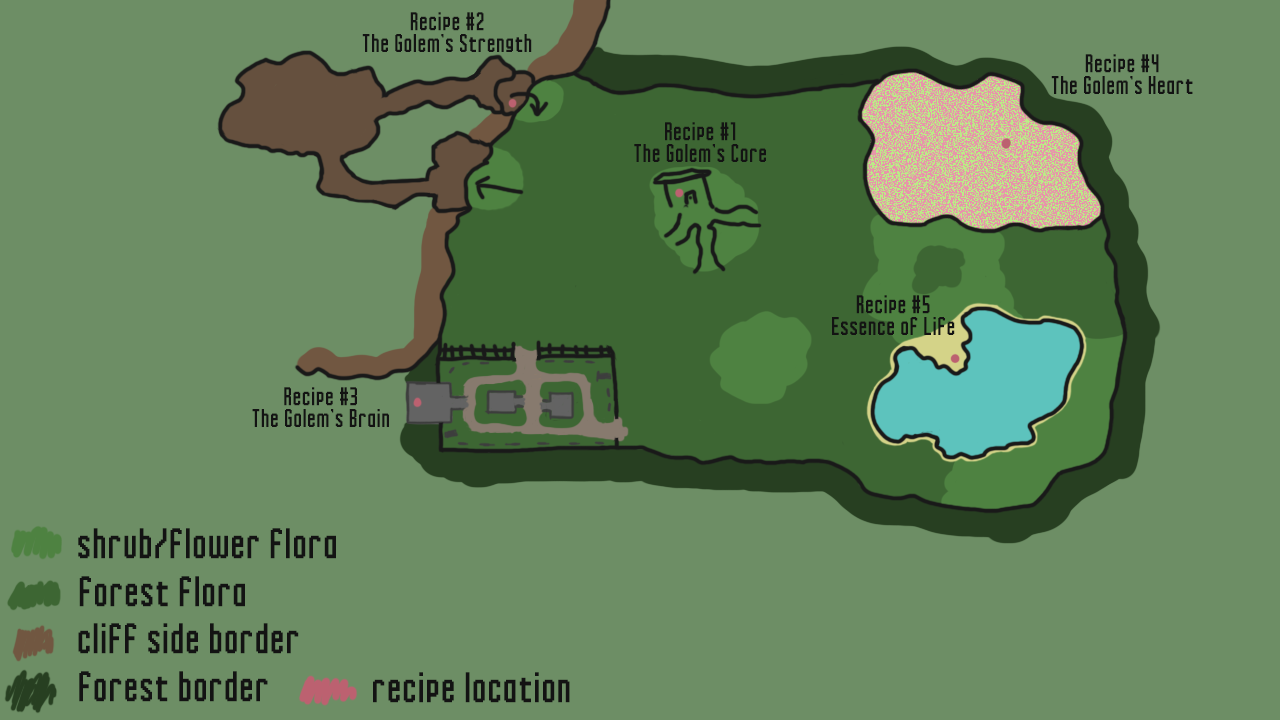
<style>
.page{position:relative;width:1280px;height:720px;background:#6d8e65}
.page>*{position:absolute;margin:0}
.t1{font:18px "Inky-Thin-Pixels";letter-spacing:0.075em;color:#131313}
.t2{font:30px "Inky-Thin-Pixels";letter-spacing:0.075em;color:#131313}
</style>
<div class="page">
<p class="t1" style="left:362px;top:12px;width:170px;height:40px;text-align:center">Recipe #2<br>The Golem’s Strength</p>
<p class="t1" style="left:1051px;top:54px;width:142px;height:40px;text-align:center">Recipe #4<br>The Golem’s Heart</p>
<p class="t1" style="left:634px;top:122px;width:132px;height:40px;text-align:center">Recipe #1<br>The Golem’s Core</p>
<p class="t1" style="left:832px;top:295px;width:123px;height:40px;text-align:center">Recipe #5<br>Essence of Life</p>
<p class="t1" style="left:252px;top:387px;width:137px;height:40px;text-align:center">Recipe #3<br>The Golem’s Brain</p>
<p class="t2" style="left:78px;top:528px;width:258px;height:31px">shrub/flower flora</p>
<p class="t2" style="left:79px;top:576px;width:166px;height:31px">forest flora</p>
<p class="t2" style="left:78px;top:623px;width:221px;height:31px">cliff side border</p>
<p class="t2" style="left:79px;top:671px;width:189px;height:31px">forest border</p>
<p class="t2" style="left:373px;top:672px;width:197px;height:31px">recipe location</p>
</div>
